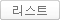
<style>
.page{position:relative;width:60px;height:20px;background:#ffffff}
.page>*{position:absolute;margin:0}
.t1{font:12px "Dotum";color:#757575}
</style>
<div class="page">
<p class="t1" style="left:13px;top:5px;width:34px;height:11px">리스트</p>
</div>
